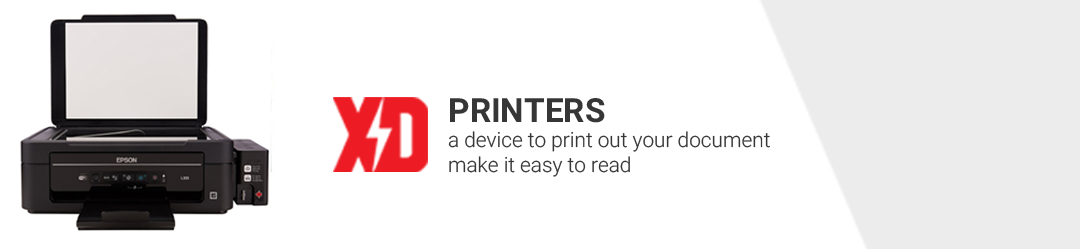
<style>
.page{position:relative;width:1080px;height:250px;background:#ffffff}
.page>*{position:absolute;margin:0}
.t1{font:33.3px "Roboto-Bold";color:#363636}
.t2{font:20.8px "Roboto-Light";color:#363636}
</style>
<div class="page">
<p class="t1" style="left:450px;top:98px;width:155px;height:25px">PRINTERS</p>
<p class="t2" style="left:448px;top:131px;width:322px;height:46px;text-align:justify">a device to print out your document<br>make it easy to read</p>
</div>
